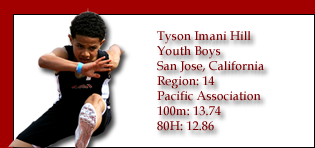
<style>
.page{position:relative;width:315px;height:148px;background:#ffffff}
.page>*{position:absolute;margin:0}
.t1{font:12.5px "BookAntiqua";color:#7b0002}
</style>
<div class="page">
<p class="t1" style="left:157px;top:31px;width:107px;height:100px">Tyson Imani Hill<br>Youth Boys<br>San Jose, California<br>Region: 14<br>Pacific Association<br>100m: 13.74<br>80H: 12.86</p>
</div>
